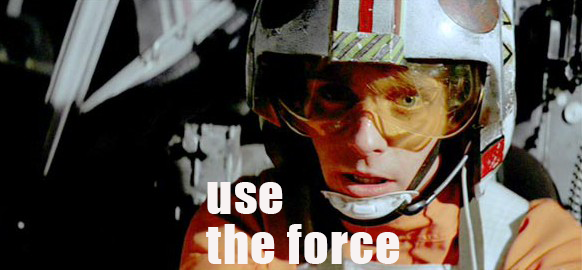
<style>
.page{position:relative;width:582px;height:270px;background:#000000}
.page>*{position:absolute;margin:0}
.t1{font:50px/50px "Impact";letter-spacing:0.025em;color:#f8f3f3}
</style>
<div class="page">
<p class="t1" style="left:206px;top:182px;width:194px;height:82px">use<br>the force</p>
</div>
